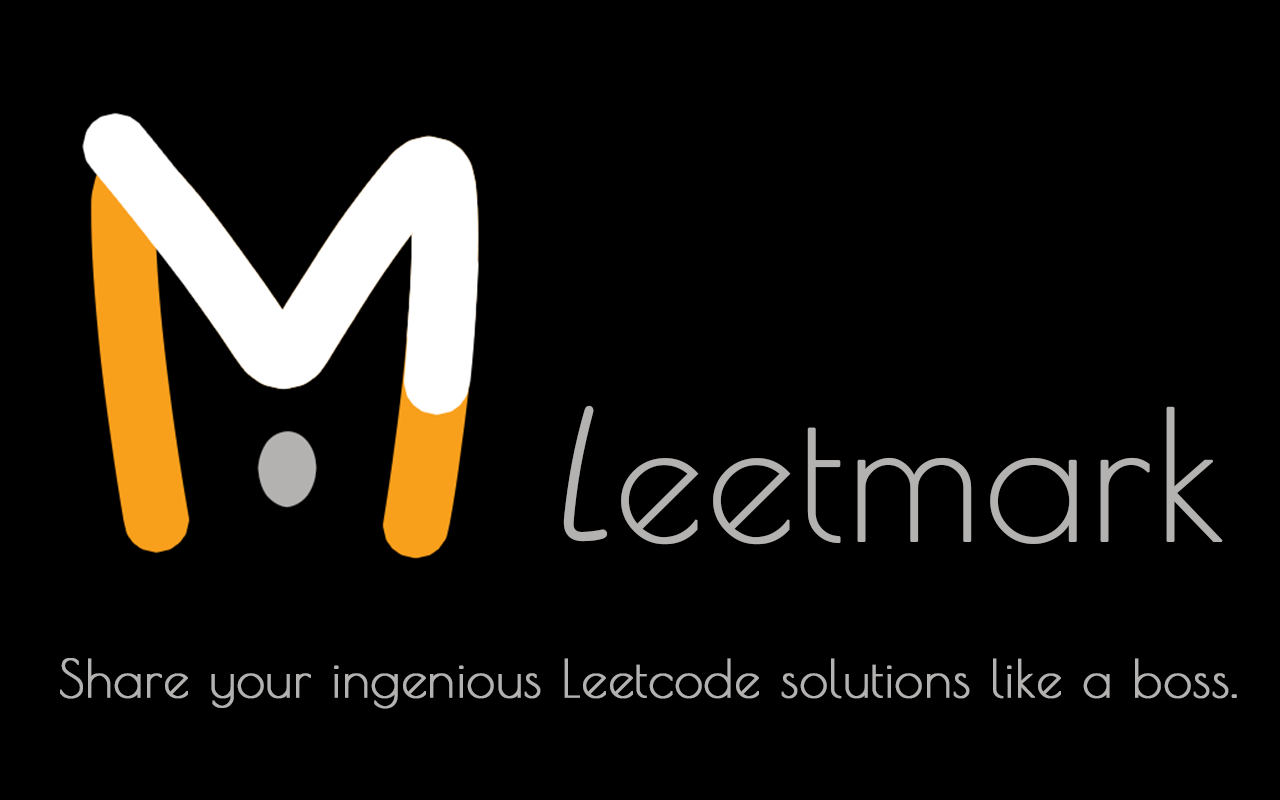
<style>
.page{position:relative;width:1280px;height:800px;background:#000000}
.page>*{position:absolute;margin:0}
.t1{font:177.9px "PoiretOne-Regular";color:#b4b2b1;font-weight:bold}
.t2{font:177.9px "STHeitiSC-Medium";color:#b4b2b1;font-weight:bold}
.t3{font:51.3px "PoiretOne-Regular";color:#b4b2b1;font-weight:bold}
</style>
<div class="page">
<p class="t1" style="left:563px;top:405px;width:660px;height:140px"><span class="t2">L</span>eetmark</p>
<p class="t3" style="left:60px;top:658px;width:1177px;height:51px">Share your ingenious Leetcode solutions like a boss.</p>
</div>
